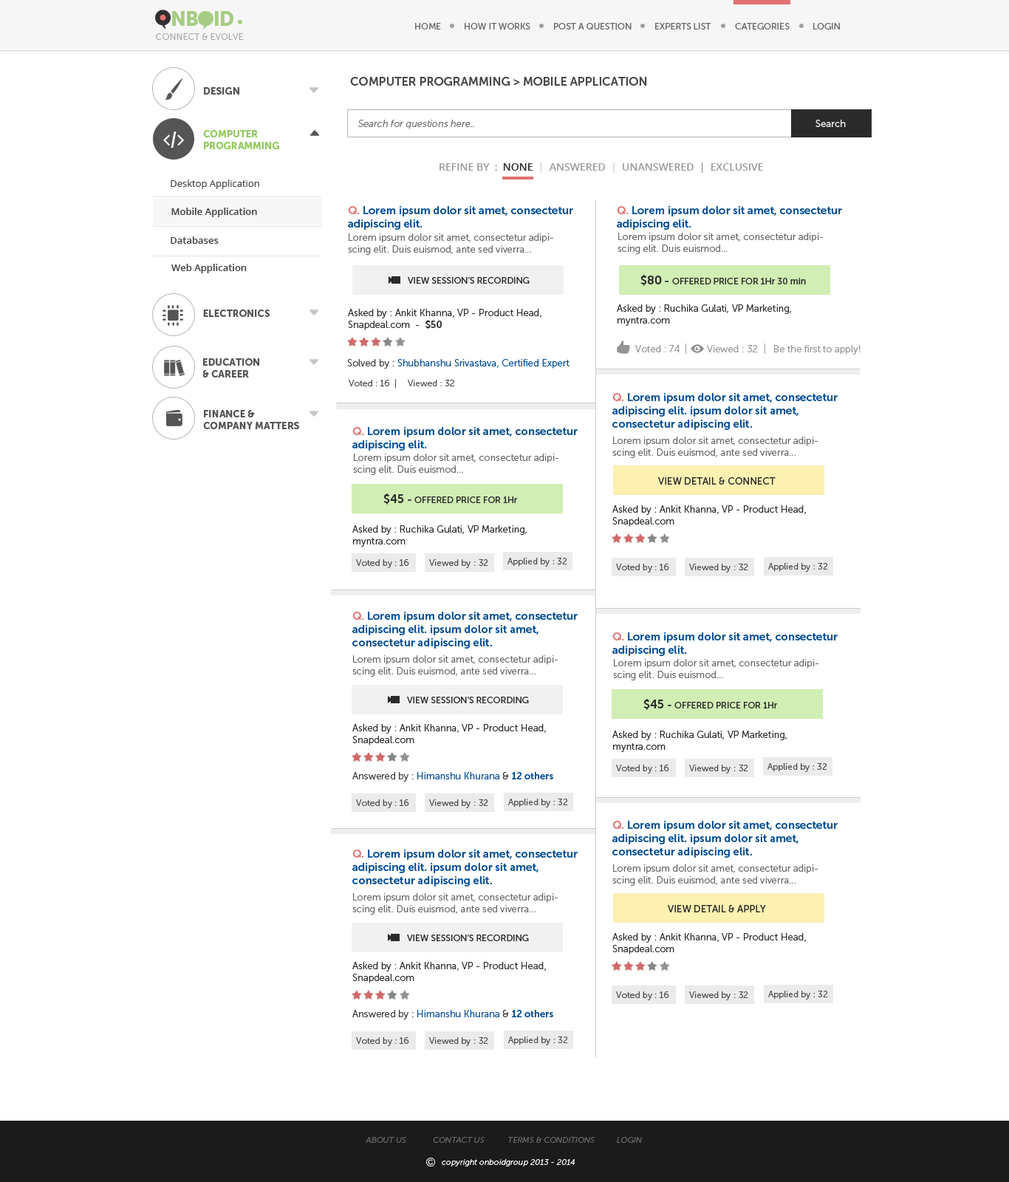
<style>
.page{position:relative;width:1009px;height:1182px;background:#ffffff}
.page>*{position:absolute;margin:0}
.t1{font:19.9px "MuseoSans-900";letter-spacing:-0.04em;color:#a6cc81;text-transform:uppercase}
.t2{font:8.9px "MuseoSans-500";color:#6a6a6a;text-transform:uppercase}
.t3{font:8.9px "MuseoSans-300";color:#a8a8a7;text-transform:uppercase}
.t4{font:11.8px "MuseoSans-700";color:#464646;text-transform:uppercase}
.t5{font:9.6px "MuseoSans-900";color:#565555;text-transform:uppercase}
.t6{font:9.6px "MuseoSans-300Italic";color:#6e6e6e}
.t7{font:9.6px "MuseoSans-500";color:#eaeaea}
.t8{font:9.6px "MuseoSans-900";color:#94c960;text-transform:uppercase}
.t9{font:10.3px "OpenSans-Semibold";color:#9c9c9c;text-transform:uppercase}
.t10{font:10.3px "OpenSans-Semibold";color:#323232;text-transform:uppercase}
.t11{font:10.3px "OpenSans-Semibold";color:#d2d2d2;text-transform:uppercase}
.t12{font:9.6px "OpenSans";color:#4b4b4b}
.t13{font:9.6px "OpenSans-Semibold";color:#444343}
.t14{font:11.1px "MuseoSans-700";color:#004b91}
.t15{font:11.1px "MuseoSans-700";color:#e27171}
.t16{font:9.6px "MuseoSans-300";color:#666666}
.t17{font:9.6px "OpenSans-Semibold";color:#434343}
.t18{font:8.9px "MuseoSans-500";color:#2a2a2a}
.t19{font:11.8px "MuseoSans-700";color:#2a2a2a}
.t20{font:11.1px "MuseoSans-700";color:#2a2a2a}
.t21{font:9.6px "MuseoSans-300";color:#2a2a2a}
.t22{font:9.6px "MuseoSans-700";color:#2a2a2a}
.t23{font:9.6px "MuseoSans-300";color:#939393}
.t24{font:9.6px "MuseoSans-300";color:#004b91}
.t25{font:9.6px "MuseoSans-300";color:#383838}
.t26{font:8.9px "MuseoSans-300";color:#4b4b4b}
.t27{font:9.6px "MuseoSans-500";color:#2a2a2a;text-transform:uppercase}
.t28{font:9.6px "MuseoSans-700";color:#004b91}
.t29{font:8.1px "MuseoSans-300Italic";color:#6a6a6a;text-transform:uppercase}
.t30{font:8.1px "MuseoSans-300Italic";color:#ffffff}
</style>
<div class="page">
<p class="t1" style="left:172px;top:11px;width:61px;height:15px">nboid</p>
<p class="t2" style="left:415px;top:23px;width:26px;height:7px">home</p>
<p class="t2" style="left:465px;top:23px;width:65px;height:7px">how it works</p>
<p class="t2" style="left:554px;top:23px;width:78px;height:7px">Post a Question</p>
<p class="t2" style="left:655px;top:23px;width:56px;height:7px">experts list</p>
<p class="t2" style="left:735px;top:23px;width:55px;height:7px">categories</p>
<p class="t2" style="left:813px;top:23px;width:27px;height:7px">login</p>
<p class="t3" style="left:156px;top:33px;width:88px;height:7px">Connect &amp; evolve</p>
<p class="t4" style="left:350px;top:77px;width:297px;height:9px">computer programming &gt; mobile application</p>
<p class="t5" style="left:204px;top:87px;width:35px;height:8px">Design</p>
<p class="t6" style="left:358px;top:120px;width:116px;height:9px">Search for questions here..</p>
<p class="t7" style="left:815px;top:120px;width:31px;height:7px">Search</p>
<p class="t8" style="left:203px;top:130px;width:76px;height:19px">computer <br>programming</p>
<p class="t9" style="left:439px;top:163px;width:324px;height:10px">REFINE BY  :  <span class="t10">NONE  </span><span class="t11">|</span>  answered  <span class="t11">|</span>  unanswered  |  Exclusive</p>
<p class="t12" style="left:171px;top:179px;width:88px;height:10px">Desktop Application</p>
<p class="t13" style="left:171px;top:208px;width:86px;height:9px">Mobile Application</p>
<p class="t14" style="left:348px;top:206px;width:225px;height:24px"><span class="t15">Q.</span> Lorem ipsum dolor sit amet, consectetur <br>adipiscing elit.</p>
<p class="t14" style="left:617px;top:206px;width:225px;height:24px"><span class="t15">Q. </span>Lorem ipsum dolor sit amet, consectetur <br>adipiscing elit.</p>
<p class="t16" style="left:348px;top:233px;width:205px;height:22px">Lorem ipsum dolor sit amet, consectetur adipiscing elit. Duis euismod, ante sed viverra...</p>
<p class="t16" style="left:618px;top:233px;width:205px;height:21px">Lorem ipsum dolor sit amet, consectetur adipiscing elit. Duis euismod...</p>
<p class="t17" style="left:171px;top:236px;width:48px;height:8px">Databases</p>
<p class="t17" style="left:171px;top:264px;width:76px;height:9px">Web Application</p>
<p class="t18" style="left:408px;top:277px;width:122px;height:7px">VIEW SESSION’S RECORDING</p>
<p class="t18" style="left:640px;top:275px;width:166px;height:11px"><span class="t19">$80</span><span class="t20"> - </span>OFFERED PRICE FOR 1Hr 30 min</p>
<p class="t21" style="left:617px;top:304px;width:174px;height:22px">Asked by : Ruchika Gulati, VP Marketing, <br>myntra.com</p>
<p class="t5" style="left:203px;top:309px;width:67px;height:8px">electronics</p>
<p class="t21" style="left:348px;top:309px;width:193px;height:21px">Asked by : Ankit Khanna, VP - Product Head, <br>Snapdeal.com  -  <span class="t22">$50</span></p>
<p class="t23" style="left:635px;top:345px;width:45px;height:7px">Voted : 74</p>
<p class="t23" style="left:707px;top:345px;width:51px;height:7px">Viewed : 32</p>
<p class="t23" style="left:774px;top:345px;width:87px;height:10px">Be the first to apply!</p>
<p class="t5" style="left:202px;top:358px;width:57px;height:19px">education<br>&amp; career</p>
<p class="t24" style="left:347px;top:359px;width:222px;height:10px"><span class="t25">Solved by : </span>Shubhanshu Srivastava, Certified Expert</p>
<p class="t26" style="left:349px;top:379px;width:47px;height:9px">Voted : 16  |</p>
<p class="t26" style="left:408px;top:380px;width:47px;height:6px">Viewed : 32</p>
<p class="t14" style="left:612px;top:393px;width:226px;height:37px"><span class="t15">Q.</span> Lorem ipsum dolor sit amet, consectetur <br>adipiscing elit. ipsum dolor sit amet, <br>consectetur adipiscing elit.</p>
<p class="t5" style="left:203px;top:410px;width:96px;height:19px">Finance &amp;<br>Company MAtters</p>
<p class="t14" style="left:352px;top:427px;width:226px;height:24px"><span class="t15">Q. </span>Lorem ipsum dolor sit amet, consectetur <br>adipiscing elit.</p>
<p class="t16" style="left:612px;top:437px;width:206px;height:21px">Lorem ipsum dolor sit amet, consectetur adipiscing elit. Duis euismod, ante sed viverra...</p>
<p class="t16" style="left:353px;top:454px;width:205px;height:21px">Lorem ipsum dolor sit amet, consectetur adipiscing elit. Duis euismod...</p>
<p class="t27" style="left:658px;top:477px;width:118px;height:8px">View Detail &amp; CONNECT</p>
<p class="t18" style="left:383px;top:493px;width:135px;height:11px"><span class="t19">$45</span><span class="t20"> - </span>OFFERED PRICE FOR 1Hr</p>
<p class="t21" style="left:612px;top:505px;width:194px;height:22px">Asked by : Ankit Khanna, VP - Product Head, <br>Snapdeal.com</p>
<p class="t21" style="left:352px;top:525px;width:175px;height:22px">Asked by : Ruchika Gulati, VP Marketing, <br>myntra.com</p>
<p class="t26" style="left:507px;top:558px;width:60px;height:9px">Applied by : 32</p>
<p class="t26" style="left:356px;top:559px;width:53px;height:9px">Voted by : 16</p>
<p class="t26" style="left:429px;top:559px;width:59px;height:9px">Viewed by : 32</p>
<p class="t26" style="left:616px;top:564px;width:53px;height:8px">Voted by : 16</p>
<p class="t26" style="left:689px;top:564px;width:59px;height:8px">Viewed by : 32</p>
<p class="t26" style="left:768px;top:563px;width:60px;height:9px">Applied by : 32</p>
<p class="t14" style="left:352px;top:612px;width:226px;height:37px"><span class="t15">Q.</span> Lorem ipsum dolor sit amet, consectetur <br>adipiscing elit. ipsum dolor sit amet, <br>consectetur adipiscing elit.</p>
<p class="t14" style="left:612px;top:632px;width:226px;height:24px"><span class="t15">Q. </span>Lorem ipsum dolor sit amet, consectetur <br>adipiscing elit.</p>
<p class="t16" style="left:352px;top:655px;width:206px;height:22px">Lorem ipsum dolor sit amet, consectetur adipiscing elit. Duis euismod, ante sed viverra...</p>
<p class="t16" style="left:613px;top:659px;width:205px;height:21px">Lorem ipsum dolor sit amet, consectetur adipiscing elit. Duis euismod...</p>
<p class="t18" style="left:407px;top:697px;width:122px;height:6px">VIEW SESSION’S RECORDING</p>
<p class="t18" style="left:643px;top:699px;width:135px;height:11px"><span class="t19">$45</span><span class="t20"> - </span>OFFERED PRICE FOR 1Hr</p>
<p class="t21" style="left:352px;top:724px;width:194px;height:21px">Asked by : Ankit Khanna, VP - Product Head, <br>Snapdeal.com</p>
<p class="t21" style="left:612px;top:731px;width:175px;height:21px">Asked by : Ruchika Gulati, VP Marketing, <br>myntra.com</p>
<p class="t24" style="left:352px;top:772px;width:201px;height:9px"><span class="t25">Answered by : </span>Himanshu Khurana <span class="t21">&amp; </span><span class="t28">12 others</span></p>
<p class="t26" style="left:616px;top:764px;width:53px;height:9px">Voted by : 16</p>
<p class="t26" style="left:689px;top:764px;width:59px;height:9px">Viewed by : 32</p>
<p class="t26" style="left:767px;top:763px;width:60px;height:9px">Applied by : 32</p>
<p class="t26" style="left:356px;top:799px;width:53px;height:9px">Voted by : 16</p>
<p class="t26" style="left:429px;top:799px;width:59px;height:9px">Viewed by : 32</p>
<p class="t26" style="left:508px;top:798px;width:60px;height:9px">Applied by : 32</p>
<p class="t14" style="left:612px;top:821px;width:226px;height:37px"><span class="t15">Q.</span> Lorem ipsum dolor sit amet, consectetur <br>adipiscing elit. ipsum dolor sit amet, <br>consectetur adipiscing elit.</p>
<p class="t14" style="left:352px;top:849px;width:226px;height:37px"><span class="t15">Q.</span> Lorem ipsum dolor sit amet, consectetur <br>adipiscing elit. ipsum dolor sit amet, <br>consectetur adipiscing elit.</p>
<p class="t16" style="left:612px;top:864px;width:206px;height:22px">Lorem ipsum dolor sit amet, consectetur adipiscing elit. Duis euismod, ante sed viverra...</p>
<p class="t16" style="left:352px;top:893px;width:206px;height:21px">Lorem ipsum dolor sit amet, consectetur adipiscing elit. Duis euismod, ante sed viverra...</p>
<p class="t27" style="left:668px;top:905px;width:98px;height:7px">View Detail &amp; APPLY</p>
<p class="t18" style="left:407px;top:934px;width:122px;height:7px">VIEW SESSION’S RECORDING</p>
<p class="t21" style="left:612px;top:933px;width:194px;height:21px">Asked by : Ankit Khanna, VP - Product Head, <br>Snapdeal.com</p>
<p class="t21" style="left:352px;top:962px;width:194px;height:21px">Asked by : Ankit Khanna, VP - Product Head, <br>Snapdeal.com</p>
<p class="t26" style="left:616px;top:991px;width:53px;height:9px">Voted by : 16</p>
<p class="t26" style="left:689px;top:991px;width:59px;height:9px">Viewed by : 32</p>
<p class="t26" style="left:768px;top:991px;width:60px;height:8px">Applied by : 32</p>
<p class="t24" style="left:352px;top:1010px;width:201px;height:9px"><span class="t25">Answered by : </span>Himanshu Khurana <span class="t21">&amp; </span><span class="t28">12 others</span></p>
<p class="t26" style="left:356px;top:1037px;width:53px;height:9px">Voted by : 16</p>
<p class="t26" style="left:429px;top:1037px;width:59px;height:9px">Viewed by : 32</p>
<p class="t26" style="left:508px;top:1036px;width:60px;height:9px">Applied by : 32</p>
<p class="t29" style="left:366px;top:1137px;width:276px;height:6px">About us       COntact us     Terms &amp; conditions          Login</p>
<p class="t30" style="left:442px;top:1159px;width:133px;height:7px">copyright onboidgroup 2013 - 2014</p>
</div>
